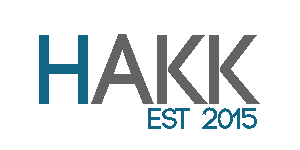
<style>
.page{position:relative;width:300px;height:150px;background:#ffffff}
.page>*{position:absolute;margin:0}
.t1{font:99px "Code-Bold";color:#636363}
.t2{font:99px "Code-Bold";color:#106684}
.t3{font:30px "Code-Bold";color:#106684}
</style>
<div class="page">
<p class="t1" style="left:39px;top:34px;width:221px;height:70px"><span class="t2">h</span>akk</p>
<p class="t3" style="left:148px;top:107px;width:109px;height:22px">est 2015</p>
</div>
